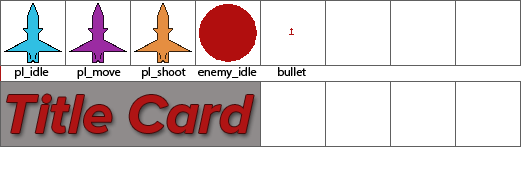
<style>
.page{position:relative;width:521px;height:180px;background:#ffffff}
.page>*{position:absolute;margin:0}
.t1{font:12px "MyriadPro-Regular";color:#000000}
.t2{font:56px "ProximaNova-BoldIt";color:#af1414}
</style>
<div class="page">
<p class="t1" style="left:15px;top:67px;width:34px;height:12px">pl_idle</p>
<p class="t1" style="left:77px;top:67px;width:44px;height:12px">pl_move</p>
<p class="t1" style="left:142px;top:67px;width:44px;height:12px">pl_shoot</p>
<p class="t1" style="left:198px;top:67px;width:59px;height:12px">enemy_idle</p>
<p class="t1" style="left:278px;top:67px;width:28px;height:9px">bullet</p>
<p class="t2" style="left:7px;top:94px;width:247px;height:39px">Title Card</p>
</div>
